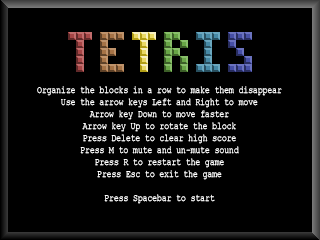
<style>
.page{position:relative;width:320px;height:240px;background:#000000}
.page>*{position:absolute;margin:0}
.t1{font:10px "CourierNewPSMT";color:#ffffff;scale:0.8 1}
</style>
<div class="page">
<p class="t1" style="left:37px;top:86px;width:245px;height:118px;text-align:center">Organize the blocks in a row to make them disappear<br>Use the arrow keys Left and Right to move<br>Arrow key Down to move faster<br>Arrow key Up to rotate the block<br>Press Delete to clear high score<br>Press M to mute and un-mute sound<br>Press R to restart the game<br>Press Esc to exit the game<br><br>Press Spacebar to start</p>
</div>
